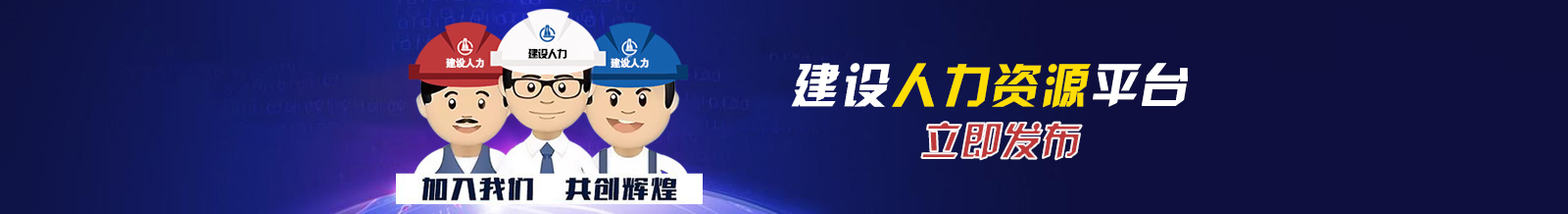
<style>
.page{position:relative;width:1568px;height:214px;background:#0e0f3f}
.page>*{position:absolute;margin:0}
.t1{font:10.5px "JLinXin";letter-spacing:-0.08em;color:#010101}
.t2{font:10.5px "FZDHTJW--GB1-0";letter-spacing:-0.08em;color:#fbf9fb}
.t3{font:47.7px "JLinXin";letter-spacing:0.06em;color:#fedd02}
.t4{font:47.7px "JLinXin";letter-spacing:0.06em;color:#fffffe}
.t5{font:39.2px "JLinXin";letter-spacing:0.02em;font-style:italic}
</style>
<div class="page">
<p class="t1" style="left:528px;top:48px;width:39px;height:11px">建设人力</p>
<p class="t2" style="left:446px;top:58px;width:38px;height:11px">建设人力</p>
<p class="t2" style="left:611px;top:58px;width:38px;height:11px">建设人力</p>
<p class="t3" style="left:791px;top:63px;width:397px;height:45px"><span class="t4">建设</span>人力资源<span class="t4">平台</span></p>
<p class="t5" style="left:921px;top:122px;width:161px;height:38px">立即发布</p>
</div>
